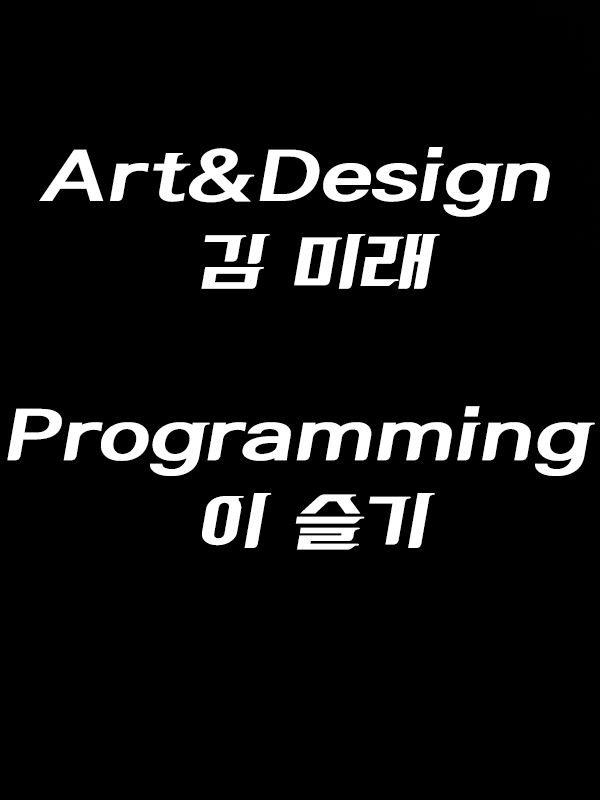
<style>
.page{position:relative;width:600px;height:800px;background:#000000}
.page>*{position:absolute;margin:0}
.t1{font:72px "DXSpdM-KSCpc-EUC-H";color:#ffffff}
</style>
<div class="page">
<p class="t1" style="left:7px;top:147px;width:588px;height:403px;text-align:center">Art&amp;Design<br> 김 미래<br><br>Programming<br> 이 슬기</p>
</div>
